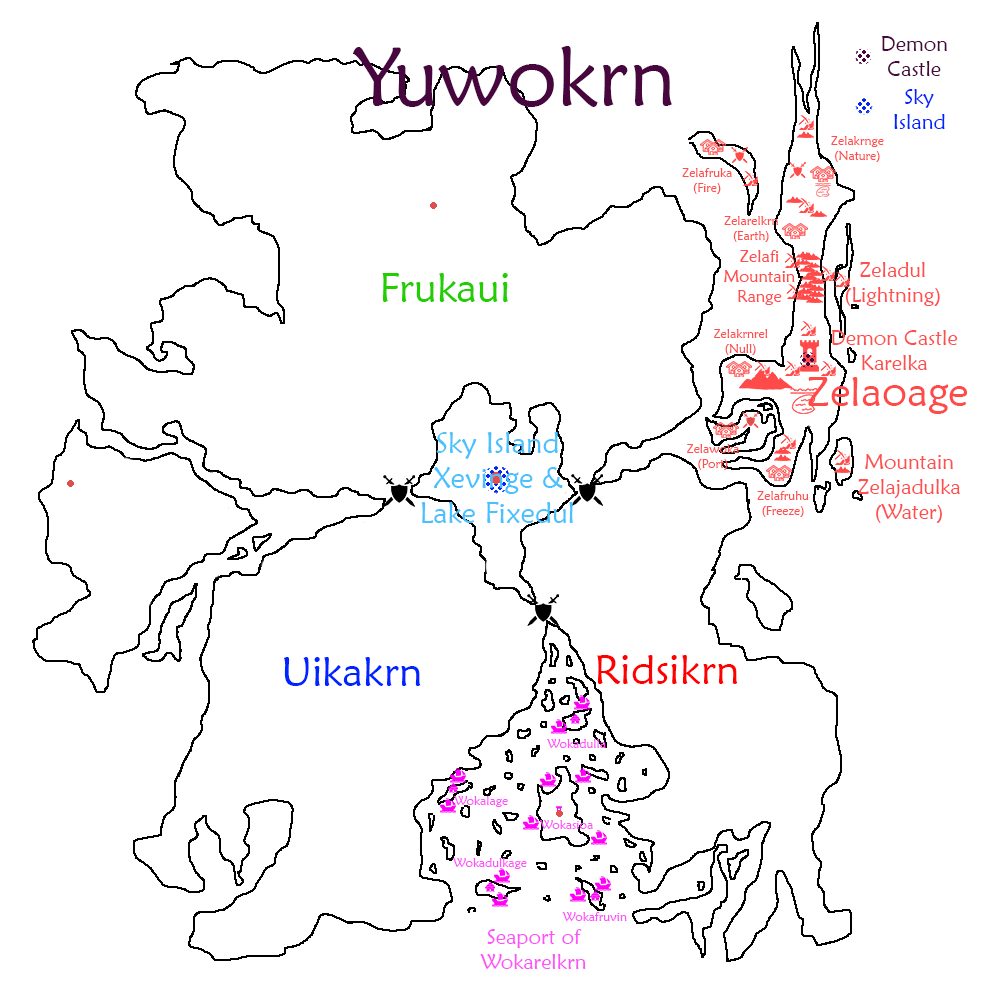
<style>
.page{position:relative;width:1000px;height:1000px;background:#ffffff}
.page>*{position:absolute;margin:0}
.t1{font:20.8px "MaiandraGD-Regular";color:#48063f}
.t2{font:83.3px "MaiandraGD-Regular";color:#48063f}
.t3{font:20.8px "MaiandraGD-Regular";color:#0024ff}
.t4{font:12.5px "MaiandraGD-Regular";color:#ff4e4e}
.t5{font:16.7px "MaiandraGD-Regular";color:#ff4e4e}
.t6{font:20.8px "MaiandraGD-Regular";color:#ff4e4e}
.t7{font:41.7px "MaiandraGD-Regular";color:#22cd00}
.t8{font:41.7px "MaiandraGD-Regular";color:#ff4a4a}
.t9{font:29.2px "MaiandraGD-Regular";color:#4ac1ff}
.t10{font:41.7px "MaiandraGD-Regular";color:#0024ff}
.t11{font:41.7px "MaiandraGD-Regular";color:#ff0000}
.t12{font:12.5px "MaiandraGD-Regular";color:#ff51f9}
.t13{font:20.8px "MaiandraGD-Regular";color:#ff51f9}
</style>
<div class="page">
<p class="t1" style="left:882px;top:36px;width:65px;height:40px;text-align:center">Demon Castle</p>
<p class="t2" style="left:352px;top:46px;width:321px;height:61px">Yuwokrn</p>
<p class="t3" style="left:894px;top:89px;width:51px;height:40px;text-align:center">Sky Island</p>
<p class="t4" style="left:831px;top:136px;width:53px;height:26px;text-align:center">Zelakrnge (Nature)</p>
<p class="t4" style="left:682px;top:168px;width:50px;height:26px;text-align:center">Zelafruka (Fire)</p>
<p class="t4" style="left:724px;top:216px;width:54px;height:26px;text-align:center">Zelarelkrn (Earth)</p>
<p class="t5" style="left:724px;top:250px;width:71px;height:55px;text-align:center">Zelafi Mountain Range</p>
<p class="t6" style="left:845px;top:262px;width:95px;height:44px;text-align:center">Zeladul (Lightning)</p>
<p class="t7" style="left:382px;top:273px;width:126px;height:29px">Frukaui</p>
<p class="t4" style="left:714px;top:329px;width:54px;height:26px;text-align:center">Zelakrnrel (Null)</p>
<p class="t6" style="left:832px;top:330px;width:126px;height:40px;text-align:center">Demon Castle Karelka</p>
<p class="t8" style="left:808px;top:377px;width:159px;height:37px">Zelaoage</p>
<p class="t9" style="left:421px;top:432px;width:152px;height:91px;text-align:center">Sky Island Xevinge &amp; Lake Fixedul</p>
<p class="t4" style="left:687px;top:444px;width:52px;height:26px;text-align:center">Zelawoka (Port)</p>
<p class="t6" style="left:858px;top:454px;width:102px;height:69px;text-align:center">Mountain Zelajadulka (Water)</p>
<p class="t4" style="left:757px;top:491px;width:52px;height:26px;text-align:center">Zelafruhu (Freeze)</p>
<p class="t10" style="left:283px;top:657px;width:138px;height:29px">Uikakrn</p>
<p class="t11" style="left:597px;top:655px;width:141px;height:29px">Ridsikrn</p>
<p class="t12" style="left:547px;top:739px;width:59px;height:9px">Wokadulla</p>
<p class="t12" style="left:454px;top:796px;width:54px;height:11px">Wokalage</p>
<p class="t12" style="left:539px;top:820px;width:54px;height:9px">Wokasioa</p>
<p class="t12" style="left:452px;top:858px;width:75px;height:11px">Wokadulkage</p>
<p class="t12" style="left:562px;top:912px;width:65px;height:9px">Wokafruvin</p>
<p class="t13" style="left:480px;top:929px;width:106px;height:40px;text-align:center">Seaport of Wokarelkrn</p>
</div>
